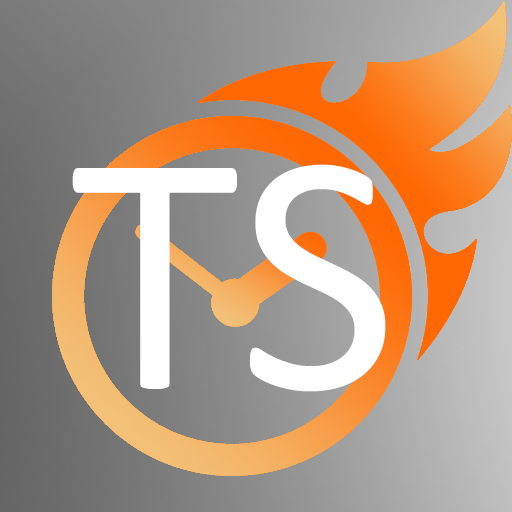
<style>
.page{position:relative;width:512px;height:512px}
.page>*{position:absolute;margin:0}
.t1{font:348.3px "Calibri";color:#ffffff}
</style>
<div class="page">
<p class="t1" style="left:72px;top:164px;width:314px;height:228px">TS</p>
</div>
